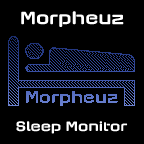
<style>
.page{position:relative;width:144px;height:144px;background:#000000}
.page>*{position:absolute;margin:0}
.t1{font:17.9px "AxaxaxRg-Bold";color:#ffffff}
.t2{font:13.9px "AxaxaxRg-Bold";color:#ffffff}
</style>
<div class="page">
<p class="t1" style="left:21px;top:11px;width:103px;height:16px">Morpheuz</p>
<p class="t2" style="left:16px;top:121px;width:112px;height:13px">Sleep Monitor</p>
</div>
